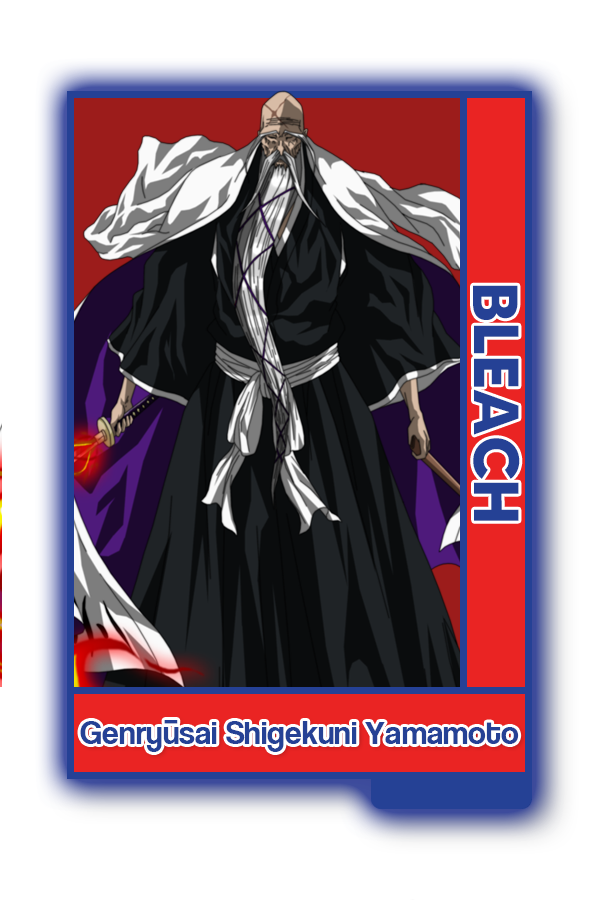
<style>
.page{position:relative;width:600px;height:900px;background:#ffffff}
.page>*{position:absolute;margin:0}
.t1{font:63.6px "MADETOMMY-Bold";color:#254195}
.t2{font:33.2px "CoolveticaRg-Regular";color:#254195}
</style>
<div class="page">
<p class="t1" style="left:473px;top:285px;width:47px;height:236px;rotate:90deg">BLEACH</p>
<p class="t2" style="left:80px;top:720px;width:439px;height:32px">Genryūsai Shigekuni Yamamoto</p>
</div>
